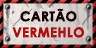
<style>
.page{position:relative;width:96px;height:48px}
.page>*{position:absolute;margin:0}
.t1{font:13.3px/16px "CenturyGothic-Bold";letter-spacing:0.005em;color:#ae0f0f;text-transform:uppercase;font-weight:bold}
.t2{font:13.3px/16px "CenturyGothic-Bold";letter-spacing:0.005em;color:#190404;text-transform:uppercase;font-weight:bold}
</style>
<div class="page">
<p class="t1" style="left:12px;top:8px;width:73px;height:30px;text-align:center"><span class="t2">CARTÃO<br></span>VERMEHLO</p>
</div>
